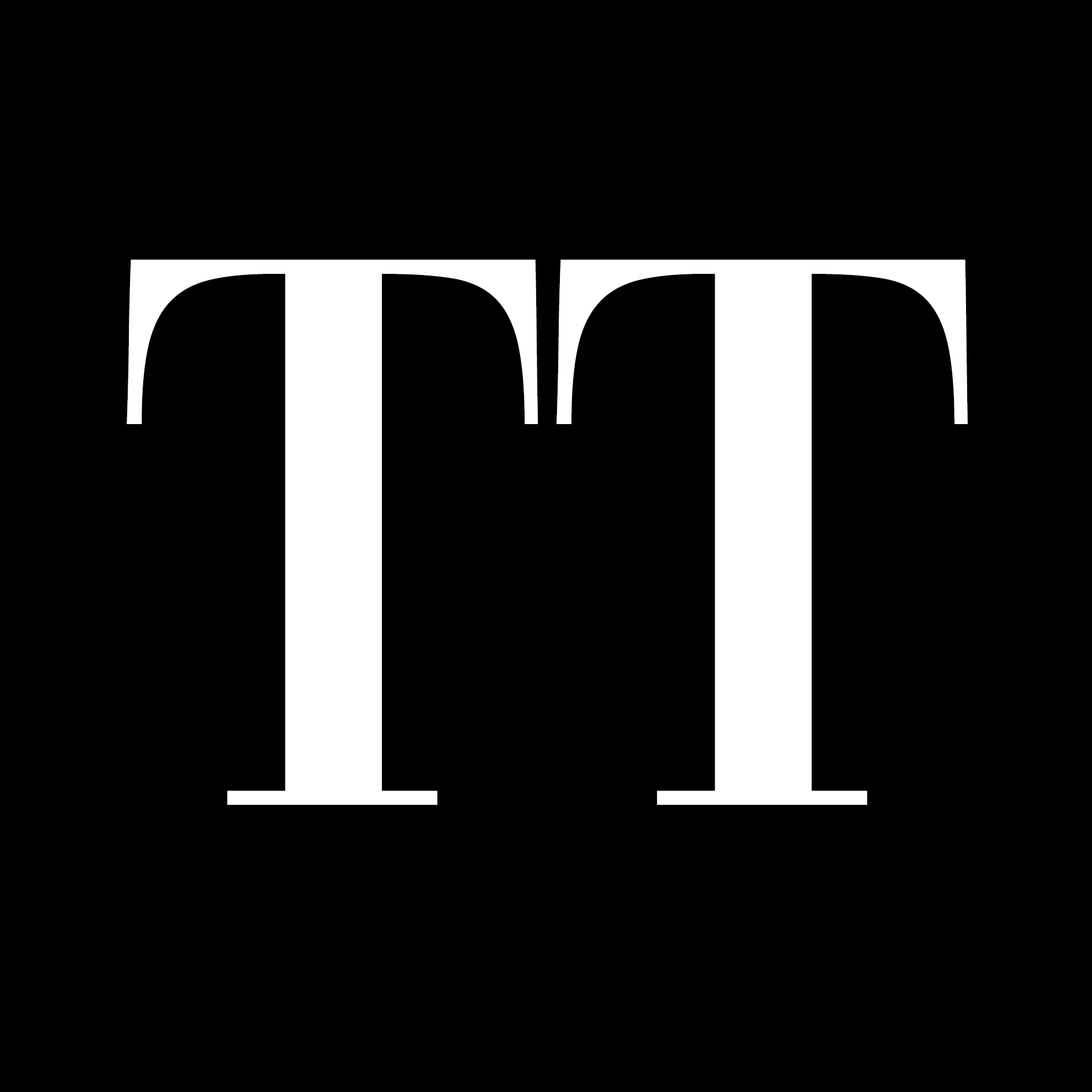
<style>
.page{position:relative;width:1092px;height:1092px;background:#000000}
.page>*{position:absolute;margin:0}
.t1{font:817px "Vogue-Regular";color:#ffffff}
</style>
<div class="page">
<p class="t1" style="left:127px;top:259px;width:841px;height:546px">TT</p>
</div>
